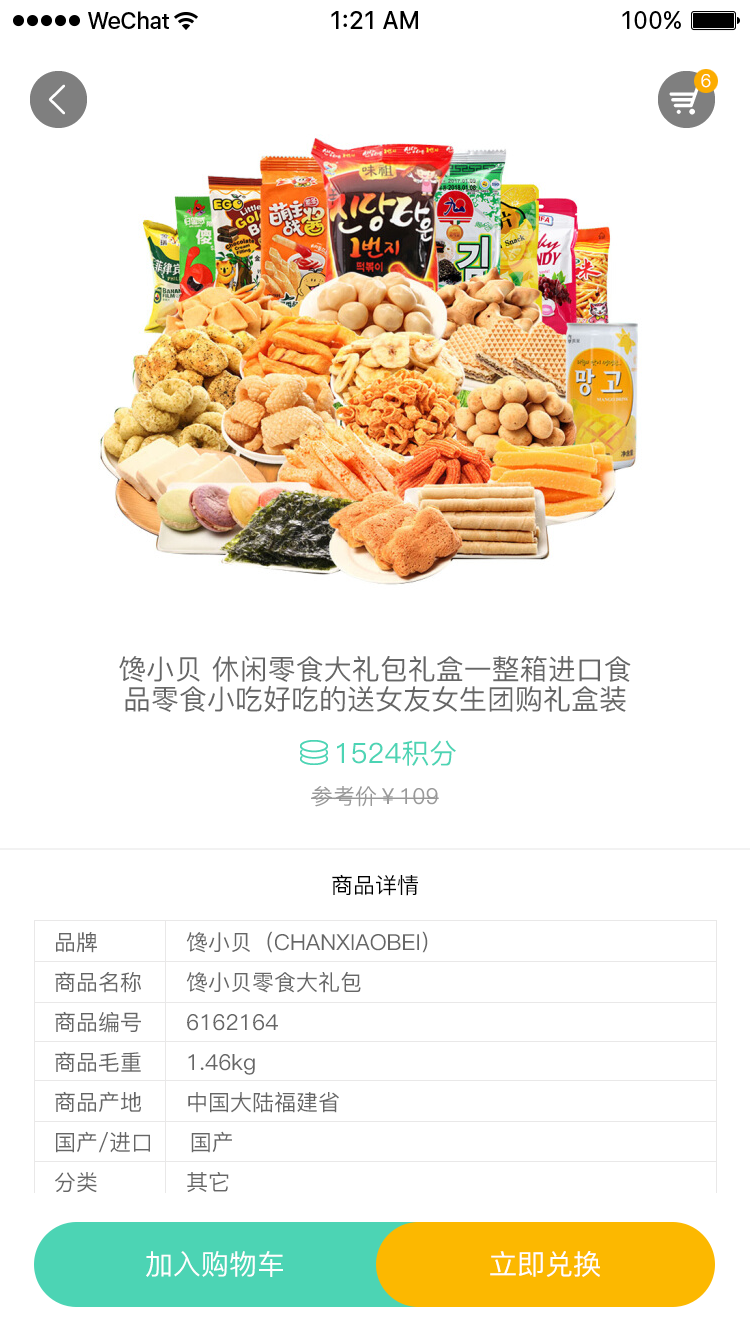
<style>
.page{position:relative;width:750px;height:1334px;background:#ffffff}
.page>*{position:absolute;margin:0}
.t1{font:18px "PingFang-SC-Medium";color:#ffffff}
.t2{font:28px/30px "PingFang-SC-Medium";color:#666666}
.t3{font:28px "PingFang-SC-Medium";color:#4cd4b4}
.t4{font:22px "PingFang-SC-Medium";color:#999999}
.t5{font:22px "PingFang-SC-Medium";color:#000000}
.t6{font:22px/40px "PingFang-SC-Medium";color:#666666}
.t7{font:28px "PingFang-SC-Medium";color:#ffffff}
</style>
<div class="page">
<p class="t1" style="left:701px;top:74px;width:10px;height:14px">6</p>
<p class="t2" style="left:119px;top:655px;width:512px;height:57px;text-align:center">馋小贝 休闲零食大礼包礼盒一整箱进口食品零食小吃好吃的送女友女生团购礼盒装</p>
<p class="t3" style="left:337px;top:740px;width:119px;height:26px">1524积分</p>
<p class="t4" style="left:311px;top:786px;width:128px;height:21px">参考价￥109</p>
<p class="t5" style="left:332px;top:874px;width:86px;height:22px">商品详情</p>
<p class="t6" style="left:55px;top:931px;width:373px;height:262px">品牌            馋小贝（CHANXIAOBEI）<br>商品名称      馋小贝零食大礼包<br>商品编号      6162164<br>商品毛重      1.46kg<br>商品产地      中国大陆福建省<br>国产/进口     国产<br>分类            其它</p>
<p class="t7" style="left:146px;top:1251px;width:137px;height:26px">加入购物车</p>
<p class="t7" style="left:490px;top:1251px;width:110px;height:26px">立即兑换</p>
</div>
